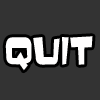
<style>
.page{position:relative;width:100px;height:100px;background:#333333}
.page>*{position:absolute;margin:0}
.t1{font:34px "Baveuse";color:#fffefe}
</style>
<div class="page">
<p class="t1" style="left:5px;top:36px;width:88px;height:35px">Quit</p>
</div>
